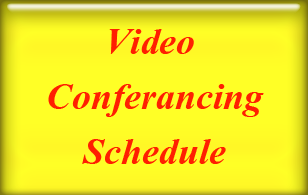
<style>
.page{position:relative;width:308px;height:195px;background:#ffff26}
.page>*{position:absolute;margin:0}
.t1{font:45.8px "Vijaya-Bold";color:#ff1f01}
</style>
<div class="page">
<p class="t1" style="left:48px;top:29px;width:216px;height:135px;text-align:center">Video <br>Conferancing<br>Schedule</p>
</div>
